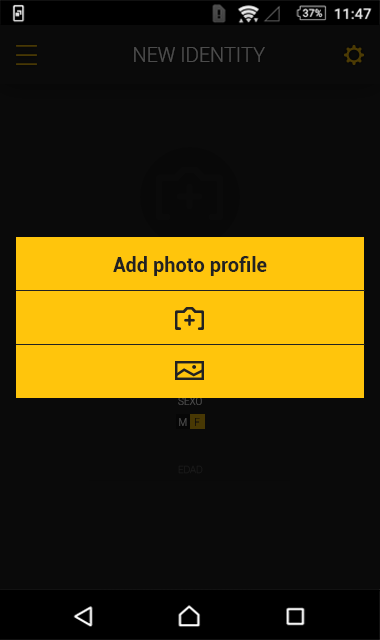
<style>
.page{position:relative;width:380px;height:640px;background:#0a0a0a}
.page>*{position:absolute;margin:0}
.t1{font:20px "Roboto-Light";color:#4c4c4c}
.t2{font:20px "Roboto-Bold";color:#222222}
.t3{font:10px "Roboto-Light";color:#4c4c4c}
.t4{font:10px "Roboto-Light";color:#222222}
.t5{font:10px "Roboto-Thin"}
.t6{font:10px "Roboto-Bold"}
</style>
<div class="page">
<p class="t1" style="left:134px;top:47px;width:131px;height:15px">NEW IDENTITY</p>
<p class="t2" style="left:113px;top:256px;width:154px;height:20px">Add photo profile</p>
<p class="t3" style="left:178px;top:397px;width:24px;height:8px">SEXO</p>
<p class="t3" style="left:179px;top:418px;width:8px;height:8px">M</p>
<p class="t4" style="left:195px;top:418px;width:5px;height:8px">F</p>
<p class="t5" style="left:178px;top:465px;width:25px;height:9px"><span class="t6"><br></span>EDAD</p>
</div>
